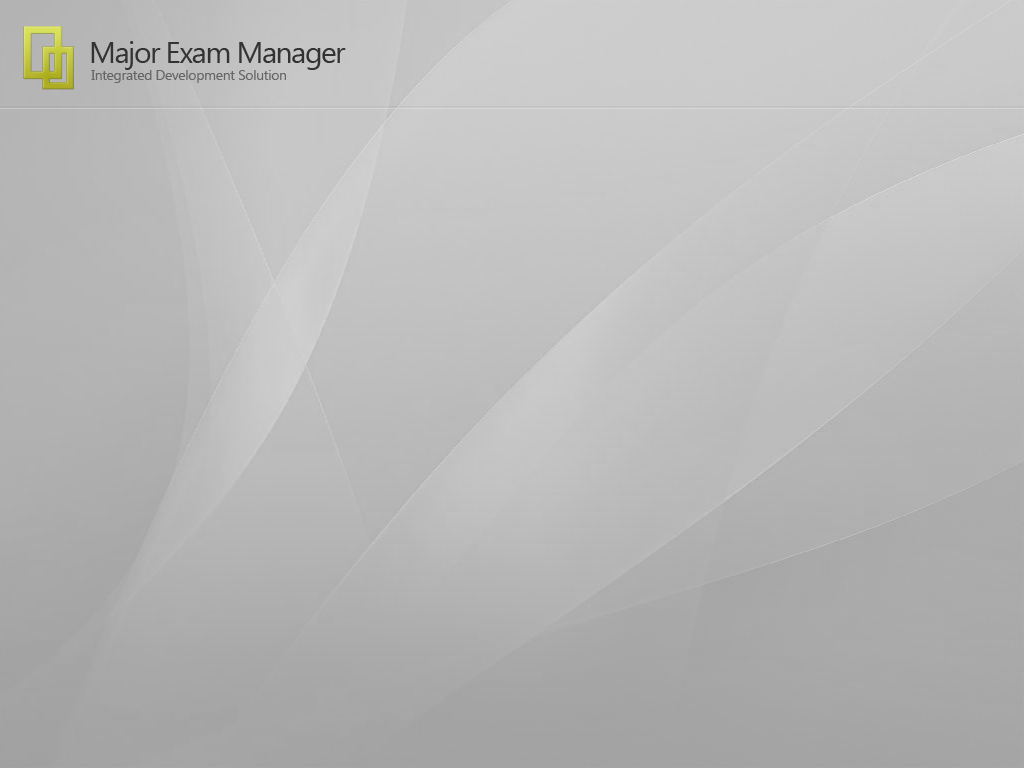
<style>
.page{position:relative;width:1024px;height:768px}
.page>*{position:absolute;margin:0}
.t1{font:30px "SegoeUI";letter-spacing:-0.05em;color:#333333}
.t2{font:14px "SegoeUI";letter-spacing:-0.025em;color:#666666}
</style>
<div class="page">
<p class="t1" style="left:91px;top:41px;width:255px;height:29px">Major Exam Manager</p>
<p class="t2" style="left:91px;top:70px;width:195px;height:13px">Integrated Development Solution</p>
</div>
